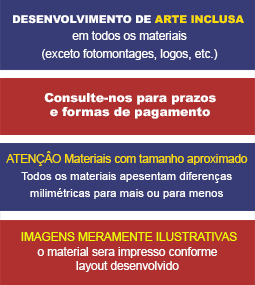
<style>
.page{position:relative;width:255px;height:285px;background:#373b76}
.page>*{position:absolute;margin:0}
.t1{font:11.7px/17.5px "ArialMT";color:#ffffff}
.t2{font:10.7px/17.5px "Arial-Black";color:#ffffff}
.t3{font:10.7px/17.5px "Arial-Black";color:#fcdc03}
.t4{font:12.4px "Arial-Black";color:#ffffff}
.t5{font:11.4px/17.1px "ArialMT";color:#ffffff}
.t6{font:11.5px/17.1px "ArialMT";color:#fcdc03}
.t7{font:11.7px/14.6px "ArialMT";color:#ffffff}
.t8{font:11.7px/14.6px "ArialMT";color:#eefd01}
</style>
<div class="page">
<p class="t1" style="left:13px;top:15px;width:231px;height:45px;text-align:center"><span class="t2">DESENVOLVIMENTO DE </span><span class="t3">ARTE INCLUSA <br></span>em todos os materiais<br>(exceto fotomontages, logos, etc.)</p>
<p class="t4" style="left:44px;top:93px;width:172px;height:26px;text-align:center">Consulte-nos para prazos <br>e formas de pagamento</p>
<p class="t5" style="left:6px;top:151px;width:242px;height:48px;text-align:center"><span class="t6">ATENÇÂO Materiais com tamanho aproximado <br></span>Todos os materiais apesentam diferenças <br>milimétricas para mais ou para menos</p>
<p class="t7" style="left:21px;top:232px;width:216px;height:40px;text-align:center"><span class="t8">IMAGENS MERAMENTE ILUSTRATIVAS<br></span>o material sera impresso conforme <br>layout desenvolvido</p>
</div>
